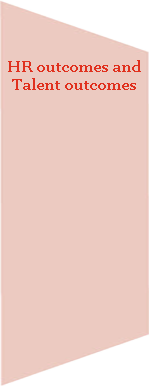
<style>
.page{position:relative;width:149px;height:386px;background:#eccac1}
.page>*{position:absolute;margin:0}
.t1{font:15px "Georgia-Bold";color:#e0301e}
</style>
<div class="page">
<p class="t1" style="left:8px;top:60px;width:133px;height:30px;text-align:center">HR outcomes and Talent outcomes</p>
</div>
